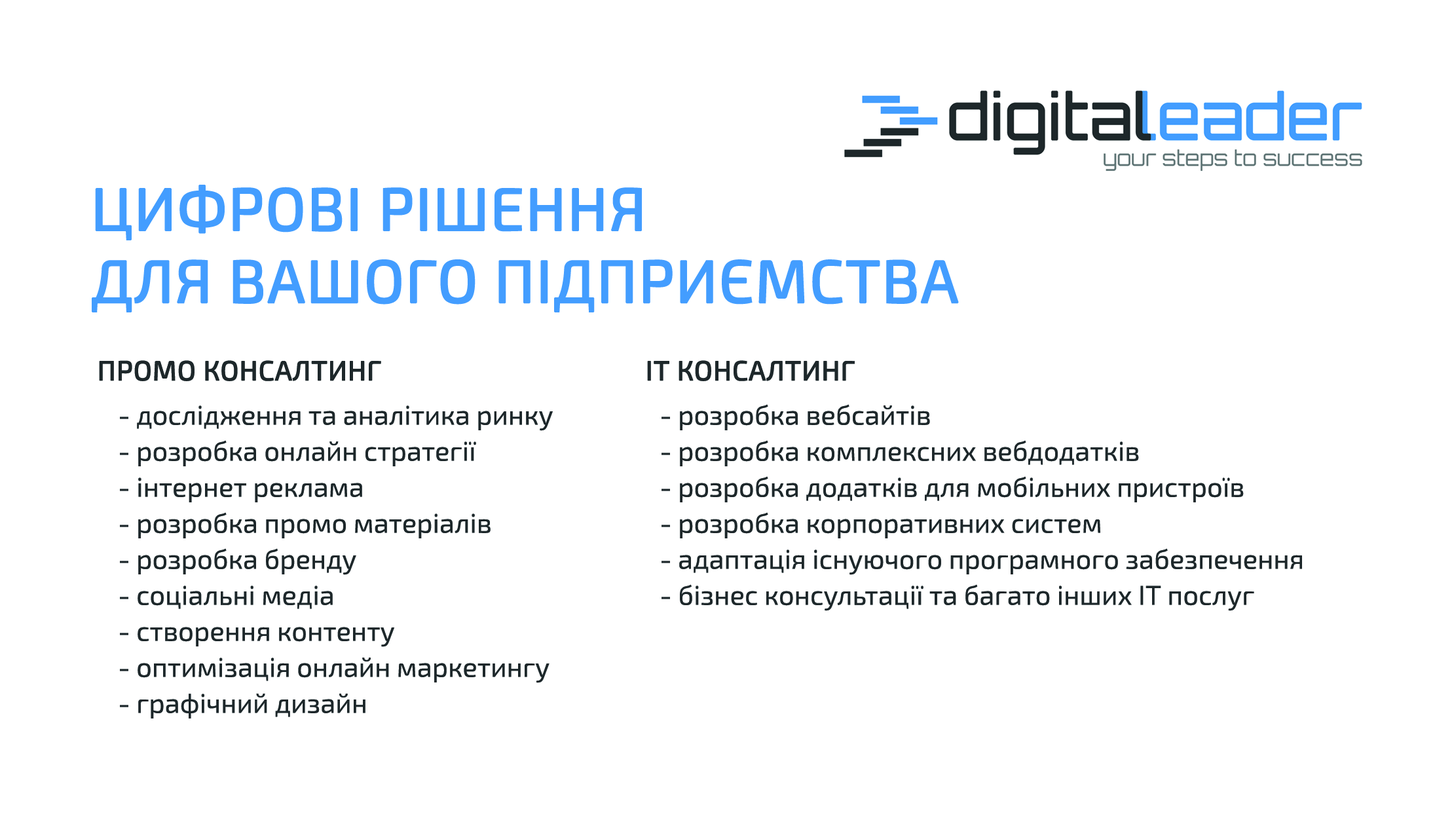
<style>
.page{position:relative;width:1454px;height:820px;background:#ffffff}
.page>*{position:absolute;margin:0}
.t1{font:60.1px "Exo2-Regular";color:#439dff;text-transform:uppercase;font-weight:bold}
.t2{font:27.5px "Exo2-Regular";color:#1d272a;text-transform:uppercase;font-weight:bold}
.t3{font:27.3px "Exo2-Regular";color:#1d272a}
</style>
<div class="page">
<p class="t1" style="left:92px;top:185px;width:867px;height:127px">Цифрові рішення <br>для вашого підприємства</p>
<p class="t2" style="left:99px;top:360px;width:282px;height:21px">ПРОМО консалтинг</p>
<p class="t2" style="left:647px;top:360px;width:208px;height:21px">ІТ Консалтинг</p>
<p class="t3" style="left:120px;top:405px;width:433px;height:314px">- дослідження та аналітика ринку<br>- розробка онлайн стратегії<br>- інтернет реклама<br>- розробка промо матеріалів<br>- розробка бренду<br>- соціальні медіа<br>- створення контенту<br>- оптимізація онлайн маркетингу<br>- графічний дизайн</p>
<p class="t3" style="left:662px;top:404px;width:640px;height:207px">- розробка вебсайтів<br>- розробка комплексних вебдодатків<br>- розробка додатків для мобільних пристроїв<br>- розробка корпоративних систем<br>- адаптація існуючого програмного забезпечення<br>- бізнес консультації та багато інших ІТ послуг</p>
</div>
